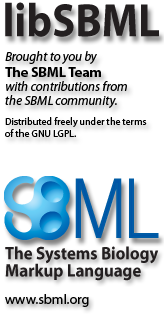
<style>
.page{position:relative;width:164px;height:314px;background:#ffffff}
.page>*{position:absolute;margin:0}
.t1{font:13px/14px "Myriad-Italic";color:#000000}
.t2{font:14px/16px "Myriad-Bold";color:#000000}
.t3{font:10px/12px "Myriad-Roman";color:#000000}
.t4{font:14px "Myriad-Roman";color:#000000}
</style>
<div class="page">
<p class="t1" style="left:5px;top:51px;width:122px;height:57px">Brought to you by<br><span class="t2">The SBML Team<br></span>with contributions from<br>the SBML community.</p>
<p class="t3" style="left:5px;top:117px;width:142px;height:20px">Distributed freely under the terms <br>of the GNU LGPL.</p>
<p class="t4" style="left:5px;top:294px;width:84px;height:13px">www.sbml.org</p>
</div>
